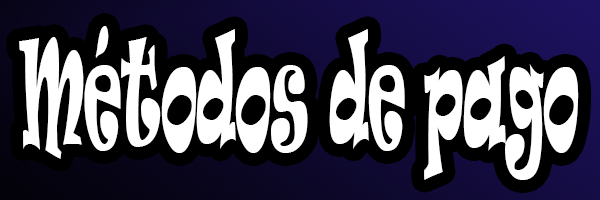
<style>
.page{position:relative;width:600px;height:200px;background:#000000}
.page>*{position:absolute;margin:0}
.t1{font:142.7px "Ravie";color:#ffffff;scale:0.35 1}
</style>
<div class="page">
<p class="t1" style="left:19px;top:26px;width:560px;height:154px">Métodos de pago</p>
</div>
